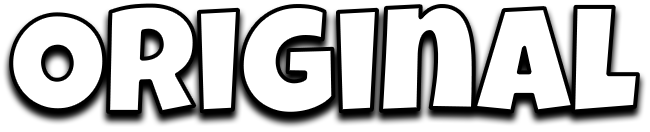
<style>
.page{position:relative;width:650px;height:132px;background:#ffffff}
.page>*{position:absolute;margin:0}
.t1{font:150px "LuckiestGuy-Regular";color:#ffffff}
</style>
<div class="page">
<p class="t1" style="left:11px;top:5px;width:627px;height:109px">Original</p>
</div>
